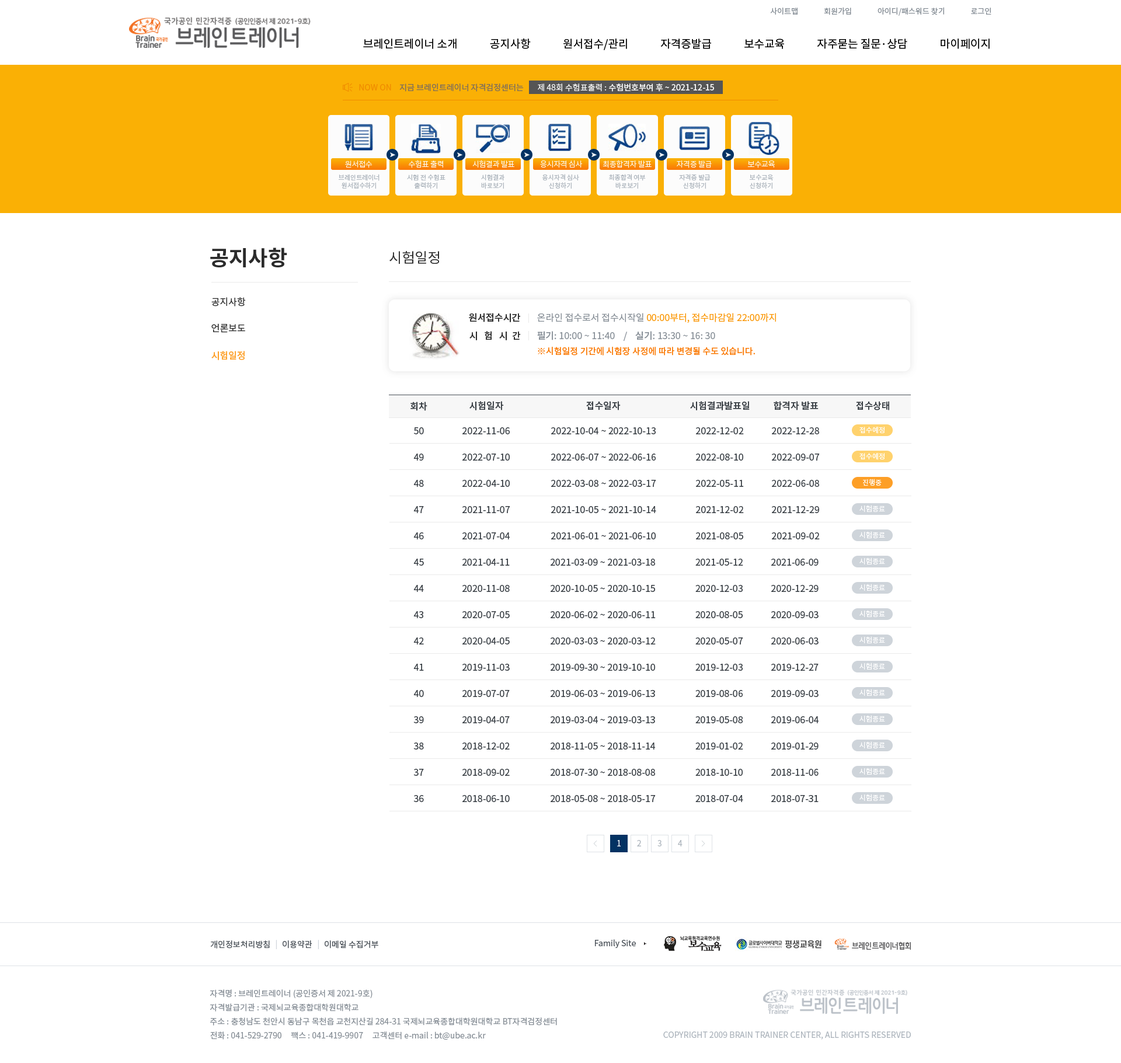
<style>
.page{position:relative;width:1121px;height:1063px;background:#ffffff}
.page>*{position:absolute;margin:0}
.t1{font:7.6px "NotoSansCJKkr-Regular";letter-spacing:0.001em;color:#868e96}
.t2{font:11.1px "NotoSansCJKkr-Regular";color:#000000}
.t3{font:8.2px "NotoSansCJKkr-Regular";color:#f08c00}
.t4{font:8.2px "NotoSansCJKkr-Regular";color:#7c6d5d}
.t5{font:8.2px "NotoSansCJKkr-Medium";color:#f8f8f8}
.t6{font:8.2px "NotoSansCJKkr-Regular";color:#f8f8f8}
.t7{font:7.6px "NotoSansCJKkr-Light";letter-spacing:-0.025em;color:#fcfcfc}
.t8{font:6.4px/8.2px "NotoSansCJKkr-Regular";color:#adb5bd}
.t9{font:21px "NotoSansCJKkr-Bold";color:#2b2b2b}
.t10{font:14px "NotoSansCJKkr-Regular";color:#2b2b2b}
.t11{font:9.3px "NotoSansCJKkr-Regular";color:#2b2b2b}
.t12{font:9.3px "NotoSansCJKkr-Medium";color:#2b2b2b}
.t13{font:9.3px "NotoSansCJKkr-Regular";color:#fa9705}
.t14{font:9.3px "NotoSansCJKkr-Regular";color:#868e96}
.t15{font:9.3px "NotoSansCJKkr-Medium";color:#868e96}
.t16{font:9.3px "NotoSansCJKkr-Medium";color:#fd9f27}
.t17{font:8.8px "NotoSansCJKkr-Medium";color:#fa7a05}
.t18{font:9.3px "NotoSansCJKkr-Medium";color:#343a40}
.t19{font:9.3px "NotoSansCJKkr-Regular";color:#343a40}
.t20{font:7px "NotoSansCJKkr-Regular";color:#ffffff}
.t21{font:8.2px "NotoSansCJKkr-Regular";color:#ffffff}
.t22{font:8.2px "NotoSansCJKkr-Regular";color:#adb5bd}
.t23{font:8.2px "NotoSansCJKkr-Regular";color:#495057}
.t24{font:8.2px "NotoSansCJKkr-Regular";color:#ced4da}
.t25{font:8.2px/14px "NotoSansCJKkr-Regular";color:#868e96}
</style>
<div class="page">
<p class="t1" style="left:770px;top:7px;width:222px;height:9px">사이트맵               회원가입               아이디/패스워드 찾기               로그인</p>
<p class="t2" style="left:363px;top:38px;width:627px;height:12px">브레인트레이너 소개             공지사항             원서접수/관리             자격증발급             보수교육             자주묻는 질문·상담             마이페이지</p>
<p class="t3" style="left:359px;top:84px;width:32px;height:7px">NOW ON</p>
<p class="t4" style="left:399px;top:84px;width:125px;height:8px">지금 브레인트레이너 자격검정센터는</p>
<p class="t5" style="left:538px;top:84px;width:176px;height:8px"><span class="t6">제 48회 수험표출력 : </span>수험번호부여 후 ~ 2021-12-15</p>
<p class="t7" style="left:345px;top:161px;width:28px;height:7px">원서접수</p>
<p class="t7" style="left:409px;top:160px;width:34px;height:8px">수험표 출력</p>
<p class="t7" style="left:472px;top:160px;width:43px;height:8px">시험결과 발표</p>
<p class="t7" style="left:540px;top:160px;width:43px;height:8px">응시자격 심사</p>
<p class="t7" style="left:603px;top:160px;width:49px;height:8px">최종합격자 발표</p>
<p class="t7" style="left:677px;top:160px;width:35px;height:8px">자격증 발급</p>
<p class="t7" style="left:748px;top:161px;width:27px;height:7px">보수교육</p>
<p class="t8" style="left:339px;top:174px;width:41px;height:15px;text-align:center">브레인트레이너<br>원서접수하기</p>
<p class="t8" style="left:407px;top:174px;width:39px;height:15px;text-align:center">시험 전 수험표<br>출력하기</p>
<p class="t8" style="left:481px;top:174px;width:24px;height:15px;text-align:center">시험결과<br>바로보기</p>
<p class="t8" style="left:543px;top:174px;width:36px;height:15px;text-align:center">응시자격 심사<br>신청하기</p>
<p class="t8" style="left:609px;top:174px;width:37px;height:15px;text-align:center">최종합격 여부<br>바로보기</p>
<p class="t8" style="left:679px;top:174px;width:32px;height:15px;text-align:center">자격증 발급<br>신청하기</p>
<p class="t8" style="left:750px;top:174px;width:24px;height:15px;text-align:center">보수교육<br>신청하기</p>
<p class="t9" style="left:210px;top:248px;width:77px;height:20px">공지사항</p>
<p class="t10" style="left:390px;top:251px;width:49px;height:13px">시험일정</p>
<p class="t11" style="left:211px;top:297px;width:35px;height:10px">공지사항</p>
<p class="t12" style="left:469px;top:313px;width:51px;height:9px">원서접수시간</p>
<p class="t13" style="left:537px;top:313px;width:239px;height:10px"><span class="t14">온라인 접수로서 접수시작일 </span>00:00부터, 접수마감일 22:00까지</p>
<p class="t11" style="left:211px;top:324px;width:34px;height:9px">언론보도</p>
<p class="t12" style="left:470px;top:331px;width:51px;height:9px">시   험   시  간</p>
<p class="t14" style="left:537px;top:331px;width:178px;height:10px"><span class="t15">필기</span>: 10:00 ~ 11:40    /    <span class="t15">실기</span>: 13:30 ~ 16: 30</p>
<p class="t16" style="left:211px;top:351px;width:34px;height:9px">시험일정</p>
<p class="t17" style="left:538px;top:347px;width:217px;height:9px">※시험일정 기간에 시험장 사정에 따라 변경될 수도 있습니다.</p>
<p class="t18" style="left:411px;top:402px;width:16px;height:9px">회차</p>
<p class="t18" style="left:470px;top:401px;width:34px;height:10px">시험일자</p>
<p class="t18" style="left:586px;top:401px;width:35px;height:10px">접수일자</p>
<p class="t18" style="left:690px;top:401px;width:60px;height:10px">시험결과발표일</p>
<p class="t18" style="left:774px;top:401px;width:45px;height:10px">합격자 발표</p>
<p class="t18" style="left:856px;top:401px;width:33px;height:10px">접수상태</p>
<p class="t19" style="left:414px;top:427px;width:10px;height:7px">50</p>
<p class="t19" style="left:463px;top:427px;width:47px;height:7px">2022-11-06</p>
<p class="t19" style="left:551px;top:427px;width:105px;height:7px">2022-10-04 ~ 2022-10-13</p>
<p class="t19" style="left:696px;top:427px;width:48px;height:7px">2022-12-02</p>
<p class="t19" style="left:772px;top:427px;width:47px;height:7px">2022-12-28</p>
<p class="t20" style="left:860px;top:427px;width:25px;height:7px">접수예정</p>
<p class="t19" style="left:413px;top:454px;width:11px;height:7px">49</p>
<p class="t19" style="left:463px;top:454px;width:47px;height:7px">2022-07-10</p>
<p class="t19" style="left:551px;top:454px;width:105px;height:7px">2022-06-07 ~ 2022-06-16</p>
<p class="t19" style="left:696px;top:454px;width:47px;height:7px">2022-08-10</p>
<p class="t19" style="left:772px;top:454px;width:48px;height:7px">2022-09-07</p>
<p class="t20" style="left:860px;top:453px;width:25px;height:7px">접수예정</p>
<p class="t19" style="left:413px;top:480px;width:11px;height:7px">48</p>
<p class="t19" style="left:463px;top:480px;width:47px;height:7px">2022-04-10</p>
<p class="t19" style="left:551px;top:480px;width:105px;height:7px">2022-03-08 ~ 2022-03-17</p>
<p class="t19" style="left:696px;top:480px;width:48px;height:7px">2022-05-11</p>
<p class="t19" style="left:772px;top:480px;width:47px;height:7px">2022-06-08</p>
<p class="t20" style="left:863px;top:479px;width:19px;height:7px">진행중</p>
<p class="t19" style="left:413px;top:506px;width:11px;height:7px">47</p>
<p class="t19" style="left:463px;top:506px;width:47px;height:7px">2021-11-07</p>
<p class="t19" style="left:551px;top:506px;width:105px;height:7px">2021-10-05 ~ 2021-10-14</p>
<p class="t19" style="left:696px;top:506px;width:48px;height:7px">2021-12-02</p>
<p class="t19" style="left:772px;top:506px;width:47px;height:7px">2021-12-29</p>
<p class="t20" style="left:860px;top:505px;width:25px;height:7px">시험종료</p>
<p class="t19" style="left:413px;top:533px;width:11px;height:7px">46</p>
<p class="t19" style="left:463px;top:533px;width:47px;height:7px">2021-07-04</p>
<p class="t19" style="left:551px;top:533px;width:105px;height:7px">2021-06-01 ~ 2021-06-10</p>
<p class="t19" style="left:696px;top:533px;width:47px;height:7px">2021-08-05</p>
<p class="t19" style="left:772px;top:533px;width:48px;height:7px">2021-09-02</p>
<p class="t20" style="left:860px;top:531px;width:25px;height:7px">시험종료</p>
<p class="t20" style="left:860px;top:558px;width:25px;height:7px">시험종료</p>
<p class="t19" style="left:413px;top:559px;width:406px;height:7px">45                 2021-04-11                2021-03-09 ~ 2021-03-18               2021-05-12           2021-06-09</p>
<p class="t19" style="left:413px;top:585px;width:406px;height:7px">44                 2020-11-08                2020-10-05 ~ 2020-10-15               2020-12-03           2020-12-29</p>
<p class="t20" style="left:860px;top:584px;width:25px;height:7px">시험종료</p>
<p class="t19" style="left:413px;top:611px;width:406px;height:7px">43                 2020-07-05                2020-06-02 ~ 2020-06-11               2020-08-05           2020-09-03</p>
<p class="t20" style="left:860px;top:610px;width:25px;height:7px">시험종료</p>
<p class="t19" style="left:413px;top:638px;width:406px;height:7px">42                 2020-04-05                2020-03-03 ~ 2020-03-12               2020-05-07           2020-06-03</p>
<p class="t20" style="left:860px;top:637px;width:25px;height:7px">시험종료</p>
<p class="t19" style="left:413px;top:664px;width:406px;height:7px">41                 2019-11-03                2019-09-30 ~ 2019-10-10               2019-12-03           2019-12-27</p>
<p class="t20" style="left:860px;top:663px;width:25px;height:7px">시험종료</p>
<p class="t20" style="left:860px;top:689px;width:25px;height:7px">시험종료</p>
<p class="t19" style="left:413px;top:690px;width:406px;height:7px">40                 2019-07-07                2019-06-03 ~ 2019-06-13               2019-08-06           2019-09-03</p>
<p class="t19" style="left:413px;top:717px;width:406px;height:7px">39                 2019-04-07                2019-03-04 ~ 2019-03-13               2019-05-08           2019-06-04</p>
<p class="t20" style="left:860px;top:715px;width:25px;height:7px">시험종료</p>
<p class="t19" style="left:413px;top:743px;width:406px;height:7px">38                 2018-12-02                2018-11-05 ~ 2018-11-14               2019-01-02           2019-01-29</p>
<p class="t20" style="left:860px;top:742px;width:25px;height:7px">시험종료</p>
<p class="t19" style="left:413px;top:769px;width:406px;height:7px">37                 2018-09-02                2018-07-30 ~ 2018-08-08               2018-10-10           2018-11-06</p>
<p class="t20" style="left:860px;top:768px;width:25px;height:7px">시험종료</p>
<p class="t19" style="left:413px;top:795px;width:406px;height:7px">36                 2018-06-10                2018-05-08 ~ 2018-05-17               2018-07-04           2018-07-31</p>
<p class="t20" style="left:860px;top:794px;width:25px;height:7px">시험종료</p>
<p class="t21" style="left:617px;top:840px;width:4px;height:7px">1</p>
<p class="t22" style="left:637px;top:840px;width:4px;height:7px">2</p>
<p class="t22" style="left:658px;top:840px;width:4px;height:7px">3</p>
<p class="t22" style="left:678px;top:840px;width:5px;height:7px">4</p>
<p class="t23" style="left:210px;top:941px;width:60px;height:8px">개인정보처리방침</p>
<p class="t24" style="left:276px;top:940px;width:1px;height:10px">|</p>
<p class="t23" style="left:283px;top:941px;width:29px;height:8px">이용약관</p>
<p class="t24" style="left:318px;top:940px;width:1px;height:10px">|</p>
<p class="t23" style="left:325px;top:941px;width:53px;height:8px">이메일 수집거부</p>
<p class="t23" style="left:595px;top:940px;width:41px;height:8px">Family Site</p>
<p class="t25" style="left:210px;top:990px;width:347px;height:51px">자격명 : 브레인트레이너 (공인증서 제 2021-9호)<br>자격발급기관 : 국제뇌교육종합대학원대학교<br>주소 : 충청남도 천안시 동남구 목천읍 교천지산길 284-31 국제뇌교육종합대학원대학교 BT자격검정센터<br>전화 : 041-529-2790     팩스 : 041-419-9907     고객센터 e-mail : bt@ube.ac.kr</p>
<p class="t22" style="left:663px;top:1032px;width:248px;height:8px">COPYRIGHT 2009 BRAIN TRAINER CENTER, ALL RIGHTS RESERVED</p>
</div>
